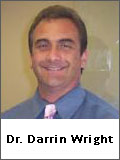
<style>
.page{position:relative;width:120px;height:160px;background:#ffffff}
.page>*{position:absolute;margin:0}
.t1{font:12px "Calibri";color:#000000;font-weight:bold}
</style>
<div class="page">
<p class="t1" style="left:7px;top:135px;width:106px;height:10px">Dr. Darrin Wright</p>
</div>
